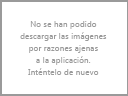
<style>
.page{position:relative;width:128px;height:96px;background:#ffffff}
.page>*{position:absolute;margin:0}
.t1{font:8px/12px "Ebrima";letter-spacing:0.025em;color:#9a9a9a}
</style>
<div class="page">
<p class="t1" style="left:20px;top:21px;width:87px;height:54px;text-align:center">No se han podido<br>descargar las imágenes<br>por razones ajenas<br>a la aplicación.<br>Inténtelo de nuevo</p>
</div>
